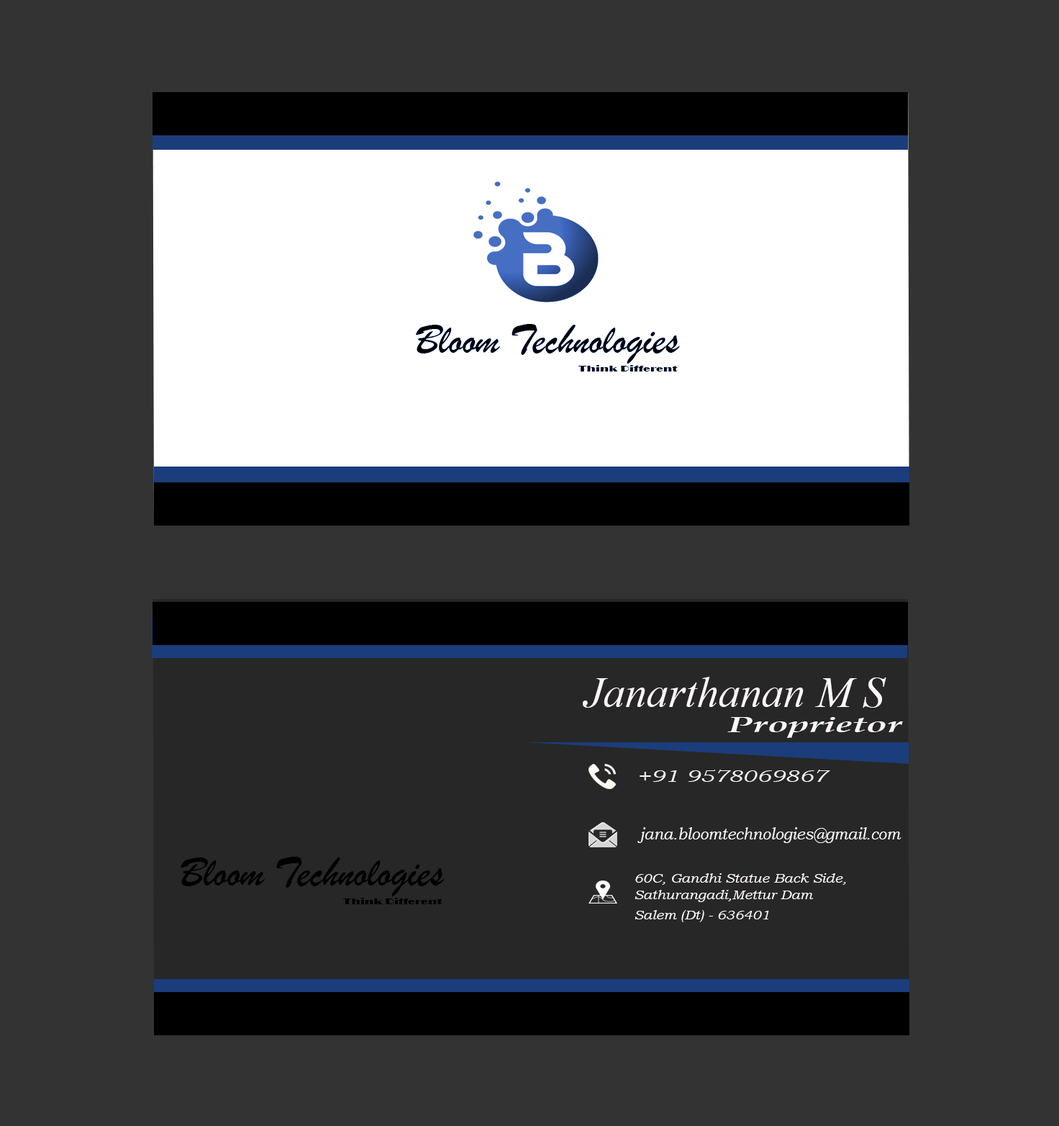
<style>
.page{position:relative;width:1059px;height:1126px;background:#333333}
.page>*{position:absolute;margin:0}
.t1{font:43.2px "BrushScriptMT";color:#000101}
.t2{font:8.8px "Broadway";color:#000000;scale:1.35 1}
.t3{font:43.2px "TimesNewRomanPS-ItalicMT";color:#fff7f7}
.t4{font:22.6px "BookAntiqua-BoldItalic";color:#fff7f7;scale:1.64 1}
.t5{font:17.3px "BookmanOldStyle-Italic";color:#fff7f7;scale:1.32 1}
.t6{font:16.3px "BookmanOldStyle-Italic";color:#fff7f7;scale:0.95 1}
.t7{font:12.9px/16.8px "BookmanOldStyle-Italic";color:#fff7f7;scale:1.11 1}
.t8{font:12.9px/10.1px "BookmanOldStyle-Italic";color:#fff7f7;scale:1.11 1}
</style>
<div class="page">
<p class="t1" style="left:416px;top:324px;width:264px;height:39px">Bloom Technologies</p>
<p class="t2" style="left:579px;top:365px;width:99px;height:6px">Think Different</p>
<p class="t3" style="left:583px;top:677px;width:304px;height:30px">Janarthanan M S</p>
<p class="t4" style="left:728px;top:717px;width:175px;height:21px">Proprietor</p>
<p class="t5" style="left:640px;top:769px;width:191px;height:13px">+91 9578069867</p>
<p class="t6" style="left:638px;top:827px;width:264px;height:16px">jana.bloomtechnologies@gmail.com</p>
<p class="t1" style="left:181px;top:856px;width:264px;height:40px">Bloom Technologies</p>
<p class="t7" style="left:635px;top:873px;width:211px;height:49px">60C, Gandhi Statue Back Side,<br>Sathurangadi,<span class="t8">Mettur Dam <br><br>Salem (Dt) - 636401</span></p>
<p class="t2" style="left:343px;top:897px;width:100px;height:7px">Think Different</p>
</div>
